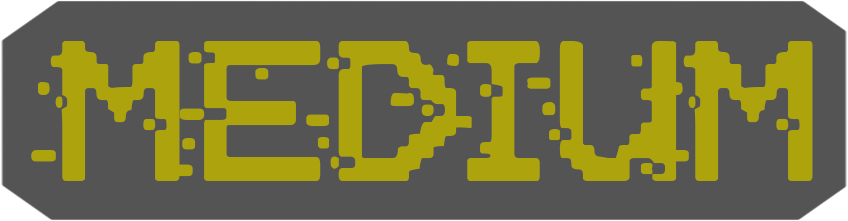
<style>
.page{position:relative;width:848px;height:221px;background:#545454}
.page>*{position:absolute;margin:0}
.t1{font:200px "PositiveSystem";color:#aca30d}
</style>
<div class="page">
<p class="t1" style="left:31px;top:40px;width:782px;height:141px">Medium</p>
</div>
